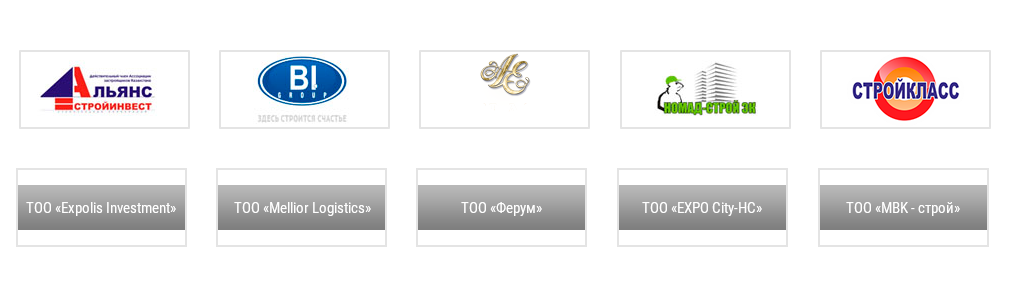
<style>
.page{position:relative;width:1016px;height:281px;background:#ffffff}
.page>*{position:absolute;margin:0}
.t1{font:15px "RobotoCondensed-Regular";color:#ffffff}
</style>
<div class="page">
<p class="t1" style="left:26px;top:202px;width:150px;height:14px">ТОО «Expolis Investment»</p>
<p class="t1" style="left:234px;top:202px;width:137px;height:14px">ТОО «Mellior Logistics»</p>
<p class="t1" style="left:461px;top:202px;width:81px;height:14px">ТОО «Ферум»</p>
<p class="t1" style="left:642px;top:202px;width:120px;height:14px">ТОО «EXPO City-HC»</p>
<p class="t1" style="left:846px;top:202px;width:114px;height:14px">ТОО «MBK - строй»</p>
</div>
